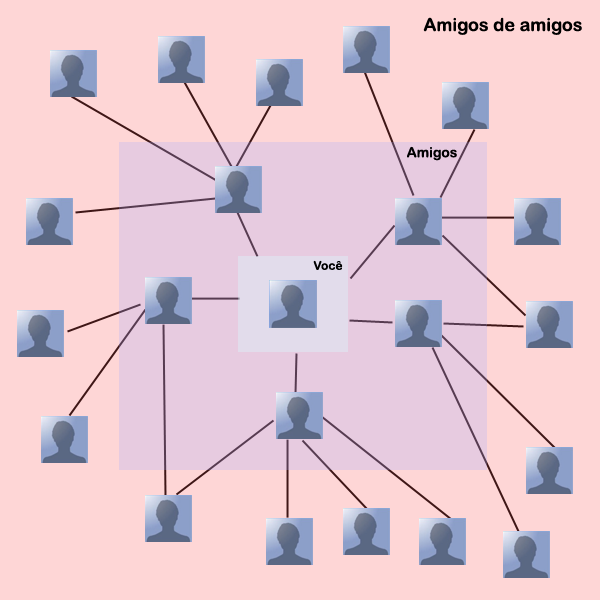
<style>
.page{position:relative;width:600px;height:600px;background:#fed6d6}
.page>*{position:absolute;margin:0}
.t1{font:18px "ArialRoundedMTBold";color:#000000}
.t2{font:14px "ArialRoundedMTBold";color:#000000}
.t3{font:12px "ArialRoundedMTBold";color:#000000}
</style>
<div class="page">
<p class="t1" style="left:423px;top:17px;width:159px;height:18px">Amigos de amigos</p>
<p class="t2" style="left:407px;top:146px;width:50px;height:15px">Amigos</p>
<p class="t3" style="left:313px;top:260px;width:30px;height:10px">Você</p>
</div>
